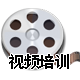
<style>
.page{position:relative;width:80px;height:80px;background:#ffffff}
.page>*{position:absolute;margin:0}
.t1{font:16px "SimHei";letter-spacing:-0.05em;color:#000000}
</style>
<div class="page">
<p class="t1" style="left:9px;top:54px;width:60px;height:15px">视频培训</p>
</div>
